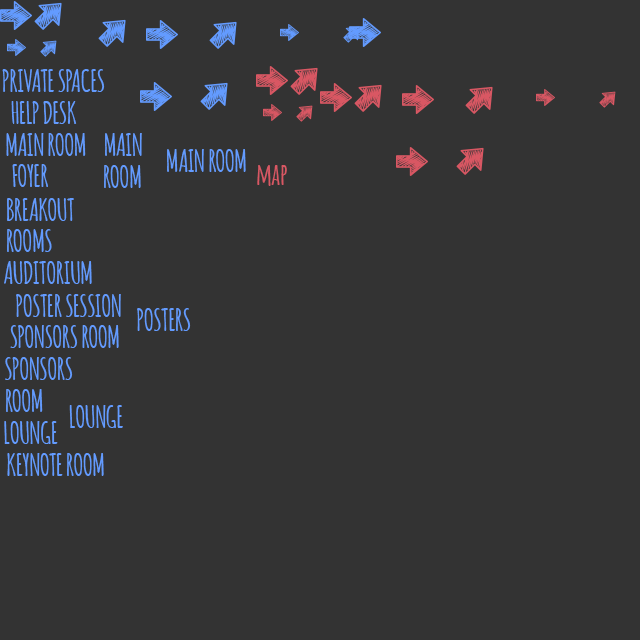
<style>
.page{position:relative;width:640px;height:640px;background:#333333}
.page>*{position:absolute;margin:0}
.t1{font:30px "Amatic-Bold";color:#639bff}
.t2{font:30px "Amatic-Bold";color:#d95763}
</style>
<div class="page">
<p class="t1" style="left:2px;top:69px;width:103px;height:23px">PRIVATE SPACES</p>
<p class="t1" style="left:11px;top:101px;width:66px;height:23px">HELP DESK</p>
<p class="t1" style="left:6px;top:133px;width:80px;height:23px">MAIN ROOM</p>
<p class="t1" style="left:105px;top:133px;width:37px;height:23px">MAIN</p>
<p class="t1" style="left:167px;top:149px;width:79px;height:23px">MAIN ROOM</p>
<p class="t1" style="left:12px;top:164px;width:36px;height:23px">FOYER</p>
<p class="t1" style="left:104px;top:165px;width:37px;height:23px">ROOM</p>
<p class="t2" style="left:257px;top:165px;width:30px;height:21px">map</p>
<p class="t1" style="left:7px;top:198px;width:67px;height:23px">BREAKOUT</p>
<p class="t1" style="left:7px;top:229px;width:45px;height:23px">ROOMS</p>
<p class="t1" style="left:4px;top:261px;width:88px;height:23px">AUDITORIUM</p>
<p class="t1" style="left:16px;top:294px;width:105px;height:23px">POSTER SESSION</p>
<p class="t1" style="left:137px;top:308px;width:54px;height:23px">POSTERS</p>
<p class="t1" style="left:10px;top:325px;width:109px;height:23px">SPONSORS ROOM</p>
<p class="t1" style="left:5px;top:357px;width:68px;height:23px">SPONSORS</p>
<p class="t1" style="left:6px;top:389px;width:37px;height:23px">ROOM</p>
<p class="t1" style="left:69px;top:405px;width:54px;height:23px">LOUNGE</p>
<p class="t1" style="left:4px;top:421px;width:54px;height:23px">LOUNGE</p>
<p class="t1" style="left:7px;top:453px;width:97px;height:23px">KEYNOTE ROOM</p>
</div>
